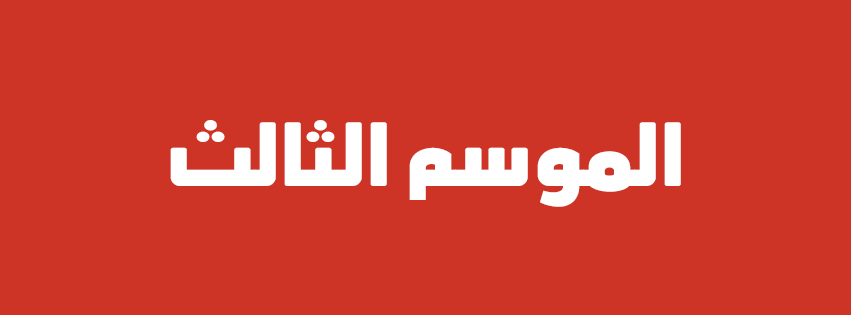
<style>
.page{position:relative;width:851px;height:315px;background:#ce3425}
.page>*{position:absolute;margin:0}
.t1{font:81px "AbdoMaster-Black";color:#ffffff}
</style>
<div class="page">
<p class="t1" style="left:170px;top:120px;width:511px;height:87px">الموسم الثالث</p>
</div>
